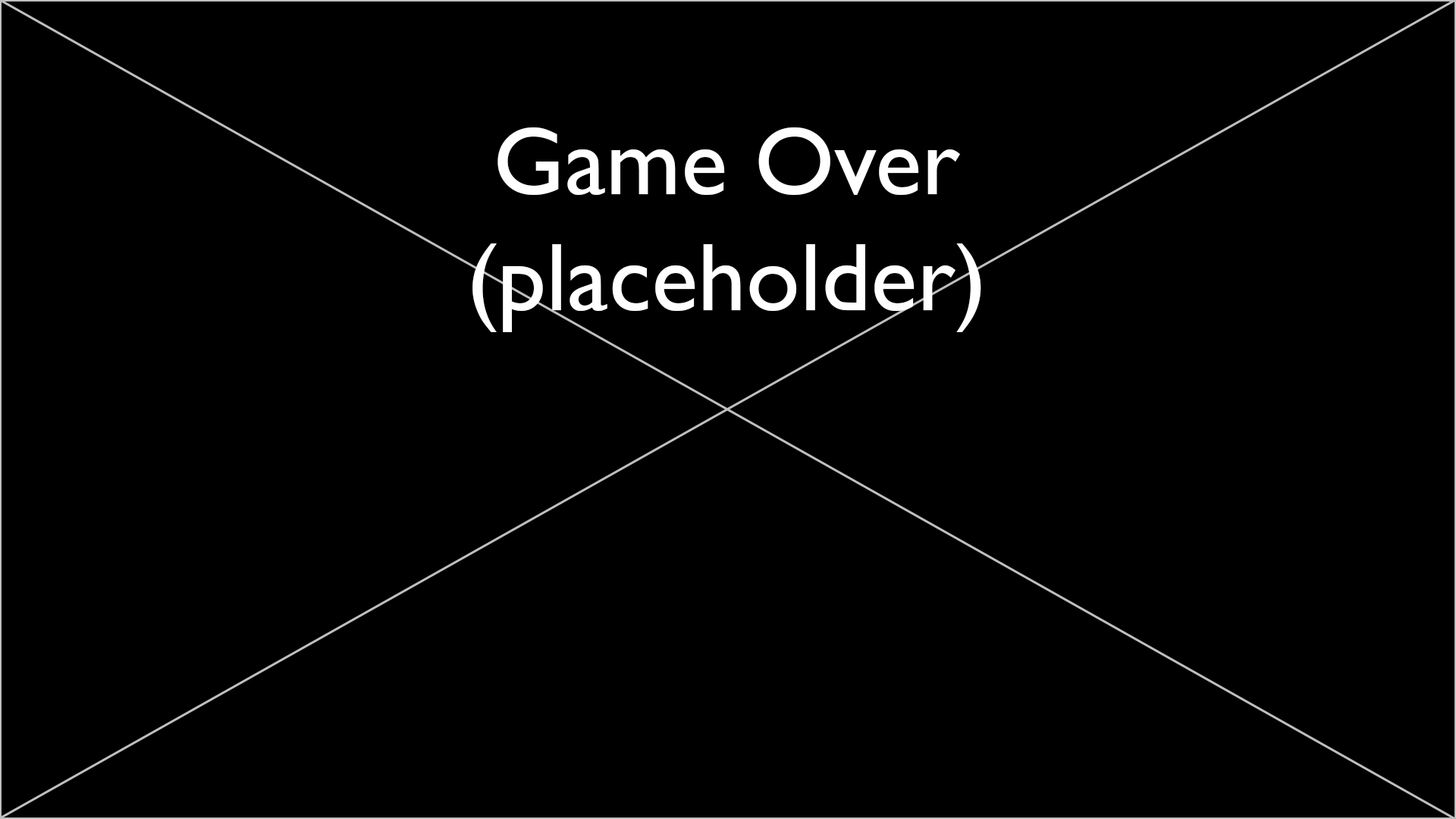
<style>
.page{position:relative;width:1456px;height:819px;background:#000000}
.page>*{position:absolute;margin:0}
.t1{font:97.1px "GillSans";color:#ffffff}
</style>
<div class="page">
<p class="t1" style="left:472px;top:127px;width:509px;height:205px;text-align:center">Game Over<br>(placeholder)</p>
</div>
